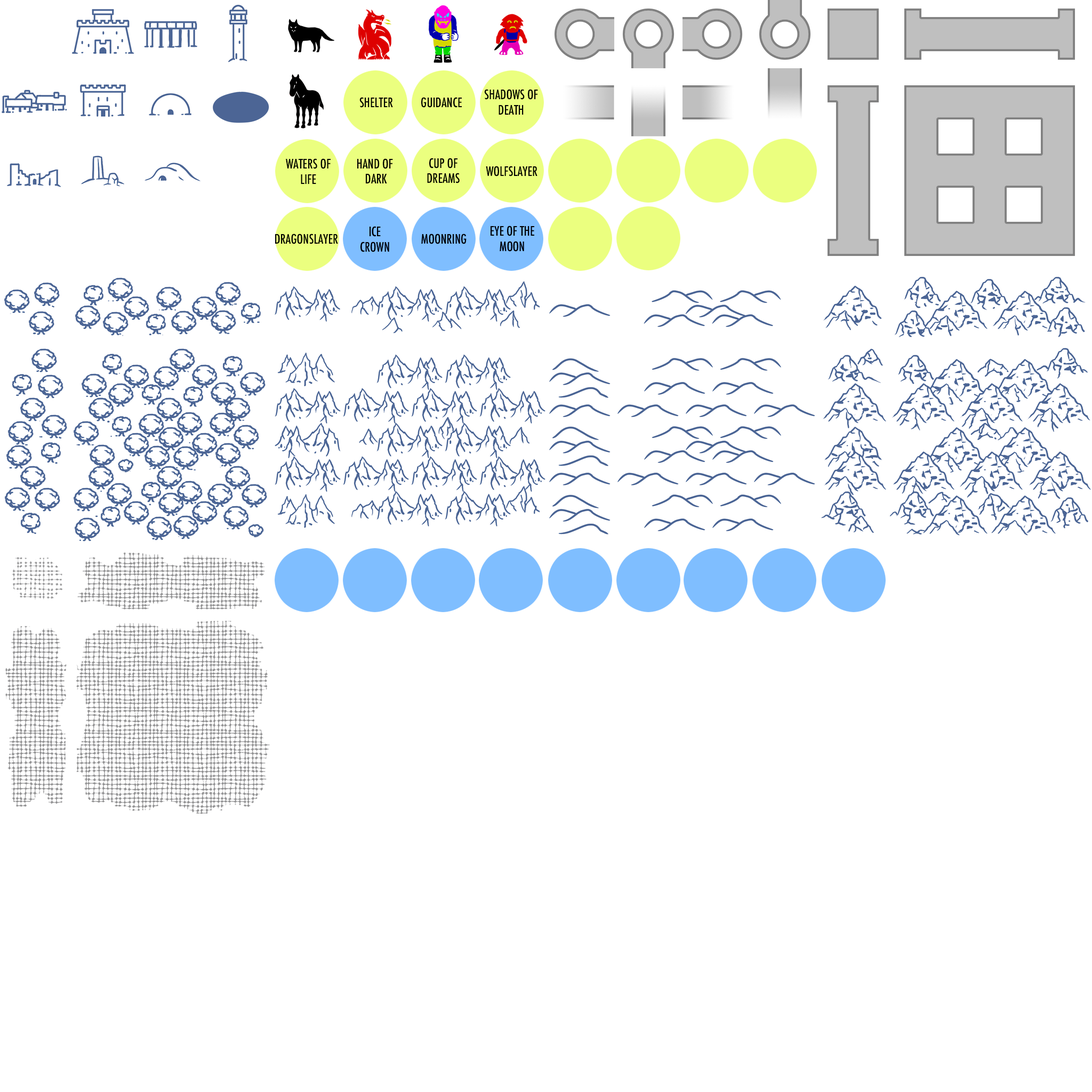
<style>
.page{position:relative;width:1092px;height:1092px;background:#ffffff}
.page>*{position:absolute;margin:0}
.t1{font:12.8px "Futura-CondensedMedium";color:#000000}
</style>
<div class="page">
<p class="t1" style="left:484px;top:89px;width:54px;height:26px;text-align:center">SHADOWS OF<br>DEATH</p>
<p class="t1" style="left:359px;top:97px;width:34px;height:11px">SHELTER</p>
<p class="t1" style="left:421px;top:97px;width:41px;height:11px">GUIDANCE</p>
<p class="t1" style="left:286px;top:158px;width:45px;height:26px;text-align:center">WATERS OF<br>LIFE</p>
<p class="t1" style="left:357px;top:158px;width:36px;height:25px;text-align:center">HAND OF <br>DARK</p>
<p class="t1" style="left:427px;top:158px;width:33px;height:25px;text-align:center">CUP OF<br>DREAMS</p>
<p class="t1" style="left:486px;top:166px;width:51px;height:10px">WOLFSLAYER</p>
<p class="t1" style="left:275px;top:234px;width:63px;height:10px">DRAGONSLAYER</p>
<p class="t1" style="left:360px;top:226px;width:29px;height:26px;text-align:center">ICE<br>CROWN</p>
<p class="t1" style="left:421px;top:234px;width:46px;height:10px">MOONRING</p>
<p class="t1" style="left:491px;top:226px;width:43px;height:26px;text-align:center">EYE OF THE<br>MOON</p>
</div>
